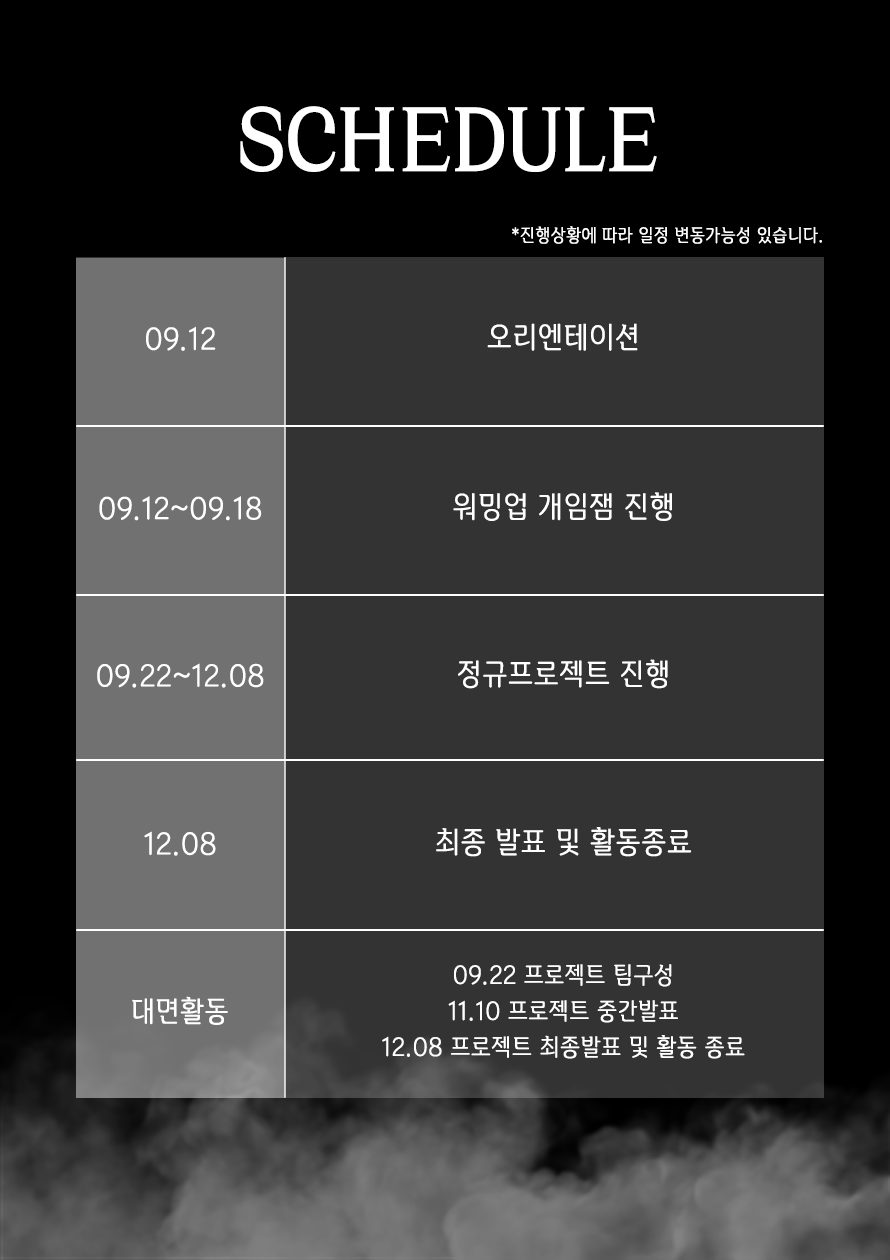
<style>
.page{position:relative;width:890px;height:1260px;background:#333333}
.page>*{position:absolute;margin:0}
.t1{font:100px "Cirka-Bold";letter-spacing:0.01em;color:#ffffff;scale:0.9 1}
.t2{font:72px "BinggraeII-Bold";letter-spacing:0.01em;color:#ffffff;scale:0.9 1}
.t3{font:18px "BinggraeII";letter-spacing:0.01em;color:#ffffff;scale:0.9 1}
.t4{font:28.7px "BinggraeII";letter-spacing:0.01em;color:#ffffff;scale:0.9 1}
.t5{font:30px "BinggraeII";letter-spacing:0.01em;color:#ffffff;scale:0.9 1}
.t6{font:24px/36px "BinggraeII";letter-spacing:0.01em;color:#ffffff;scale:0.9 1}
</style>
<div class="page">
<p class="t1" style="left:240px;top:106px;width:417px;height:66px"><span class="t2"><br></span>SCHEDULE</p>
<p class="t3" style="left:512px;top:226px;width:310px;height:18px">*진행상황에 따라 일정 변동가능성 있습니다.</p>
<p class="t4" style="left:146px;top:326px;width:70px;height:25px">09.12</p>
<p class="t5" style="left:487px;top:323px;width:151px;height:28px">오리엔테이션</p>
<p class="t4" style="left:99px;top:496px;width:163px;height:25px">09.12~09.18</p>
<p class="t5" style="left:453px;top:492px;width:219px;height:29px">워밍업 개임잼 진행</p>
<p class="t4" style="left:97px;top:663px;width:167px;height:25px">09.22~12.08</p>
<p class="t5" style="left:458px;top:659px;width:210px;height:30px">정규프로젝트 진행</p>
<p class="t4" style="left:144px;top:831px;width:72px;height:25px">12.08</p>
<p class="t5" style="left:436px;top:827px;width:256px;height:30px">최종 발표 및 활동종료</p>
<p class="t6" style="left:382px;top:964px;width:363px;height:95px;text-align:center">09.22 프로젝트 팀구성<br>11.10 프로젝트 중간발표<br>12.08 프로젝트 최종발표 및 활동 종료</p>
<p class="t4" style="left:132px;top:996px;width:96px;height:29px">대면활동</p>
</div>
